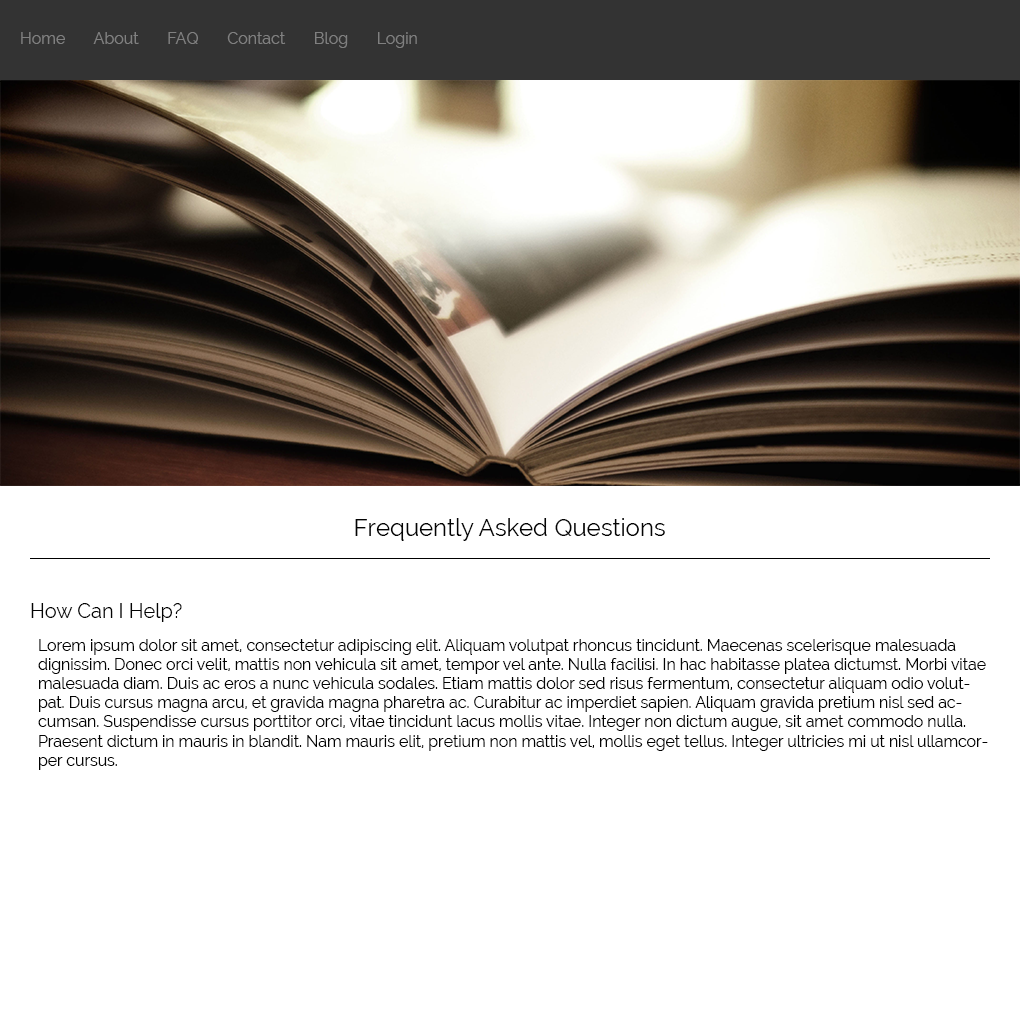
<style>
.page{position:relative;width:1020px;height:1020px;background:#ffffff}
.page>*{position:absolute;margin:0}
.t1{font:16px "Raleway";color:#808080}
.t2{font:24px "Raleway";color:#030303}
.t3{font:20px "Raleway";color:#030303}
.t4{font:16px "Raleway";color:#030303}
</style>
<div class="page">
<p class="t1" style="left:21px;top:32px;width:396px;height:16px">Home       About       FAQ       Contact       Blog       Login</p>
<p class="t2" style="left:355px;top:518px;width:310px;height:23px">Frequently Asked Questions</p>
<p class="t3" style="left:31px;top:603px;width:151px;height:19px">How Can I Help?</p>
<p class="t4" style="left:38px;top:639px;width:950px;height:131px">Lorem ipsum dolor sit amet, consectetur adipiscing elit. Aliquam volutpat rhoncus tincidunt. Maecenas scelerisque malesuada dignissim. Donec orci velit, mattis non vehicula sit amet, tempor vel ante. Nulla facilisi. In hac habitasse platea dictumst. Morbi vitae malesuada diam. Duis ac eros a nunc vehicula sodales. Etiam mattis dolor sed risus fermentum, consectetur aliquam odio volutpat. Duis cursus magna arcu, et gravida magna pharetra ac. Curabitur ac imperdiet sapien. Aliquam gravida pretium nisl sed accumsan. Suspendisse cursus porttitor orci, vitae tincidunt lacus mollis vitae. Integer non dictum augue, sit amet commodo nulla. Praesent dictum in mauris in blandit. Nam mauris elit, pretium non mattis vel, mollis eget tellus. Integer ultricies mi ut nisl ullamcorper cursus.</p>
</div>
